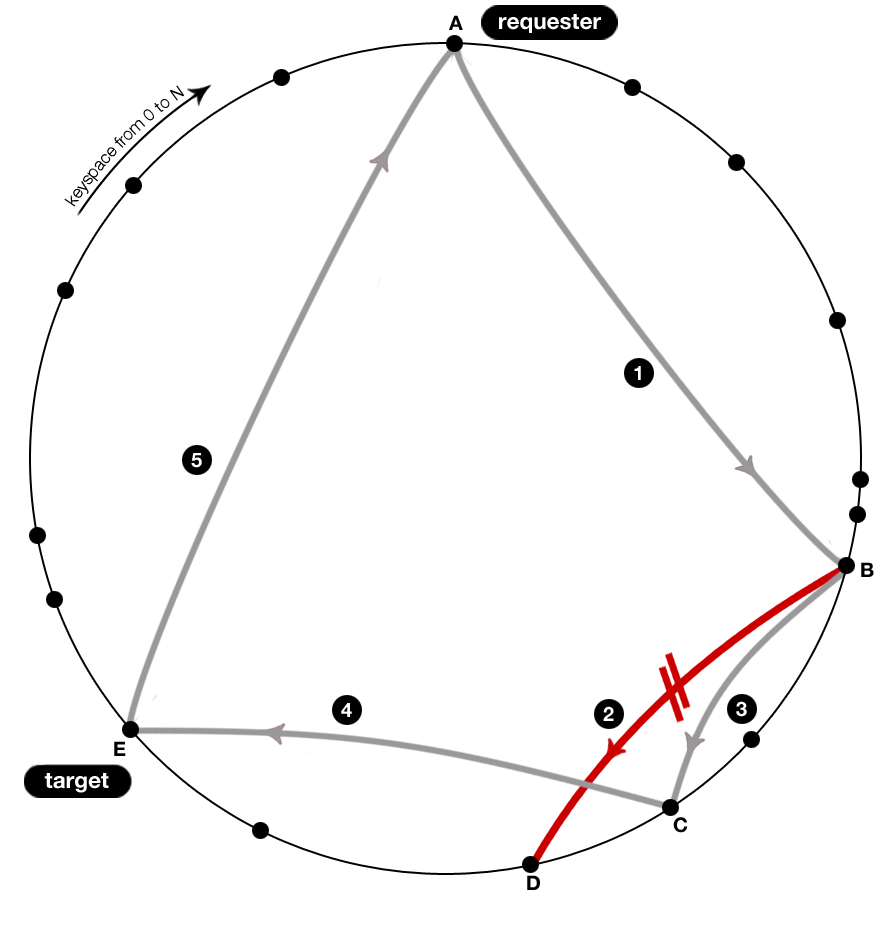
<style>
.page{position:relative;width:893px;height:927px;background:#ffffff}
.page>*{position:absolute;margin:0}
.t1{font:20px "HelveticaNeue-Bold";color:#000000}
.t2{font:22.5px "HelveticaNeue-Bold";color:#ffffff}
.t3{font:17px "HelveticaNeue-Light";color:#000000}
.t4{font:20px "HelveticaNeue-Bold";color:#ffffff}
</style>
<div class="page">
<p class="t1" style="left:449px;top:15px;width:14px;height:15px">A</p>
<p class="t2" style="left:499px;top:14px;width:102px;height:19px">requester</p>
<p class="t3" style="left:64px;top:85px;width:120px;height:122px;rotate:-45deg">keyspace from 0 to N</p>
<p class="t4" style="left:634px;top:366px;width:7px;height:14px">1</p>
<p class="t4" style="left:191px;top:453px;width:11px;height:15px">5</p>
<p class="t1" style="left:861px;top:562px;width:13px;height:15px">B</p>
<p class="t4" style="left:736px;top:701px;width:11px;height:16px">3</p>
<p class="t4" style="left:341px;top:703px;width:11px;height:14px">4</p>
<p class="t4" style="left:603px;top:706px;width:11px;height:15px">2</p>
<p class="t1" style="left:114px;top:741px;width:12px;height:15px">E</p>
<p class="t2" style="left:44px;top:773px;width:65px;height:20px">target</p>
<p class="t1" style="left:673px;top:817px;width:15px;height:16px">C</p>
<p class="t1" style="left:527px;top:875px;width:13px;height:15px">D</p>
</div>
